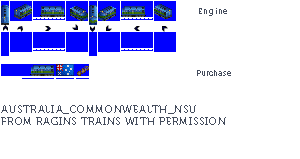
<style>
.page{position:relative;width:300px;height:159px;background:#ffffff}
.page>*{position:absolute;margin:0}
.t1{font:8px "Museo700-Regular";letter-spacing:0.075em;color:#444c5c}
.t2{font:8px "Museo700-Regular";color:#444c5c}
.t3{font:10px "Museo700-Regular";letter-spacing:0.075em;color:#444c5c;text-transform:uppercase}
</style>
<div class="page">
<p class="t1" style="left:199px;top:8px;width:28px;height:8px">Engine</p>
<p class="t2" style="left:197px;top:70px;width:34px;height:6px">Purchase</p>
<p class="t3" style="left:1px;top:105px;width:225px;height:20px">Australia_COMMONWEALTH_NSU<br>from ragins trains with permission</p>
</div>
